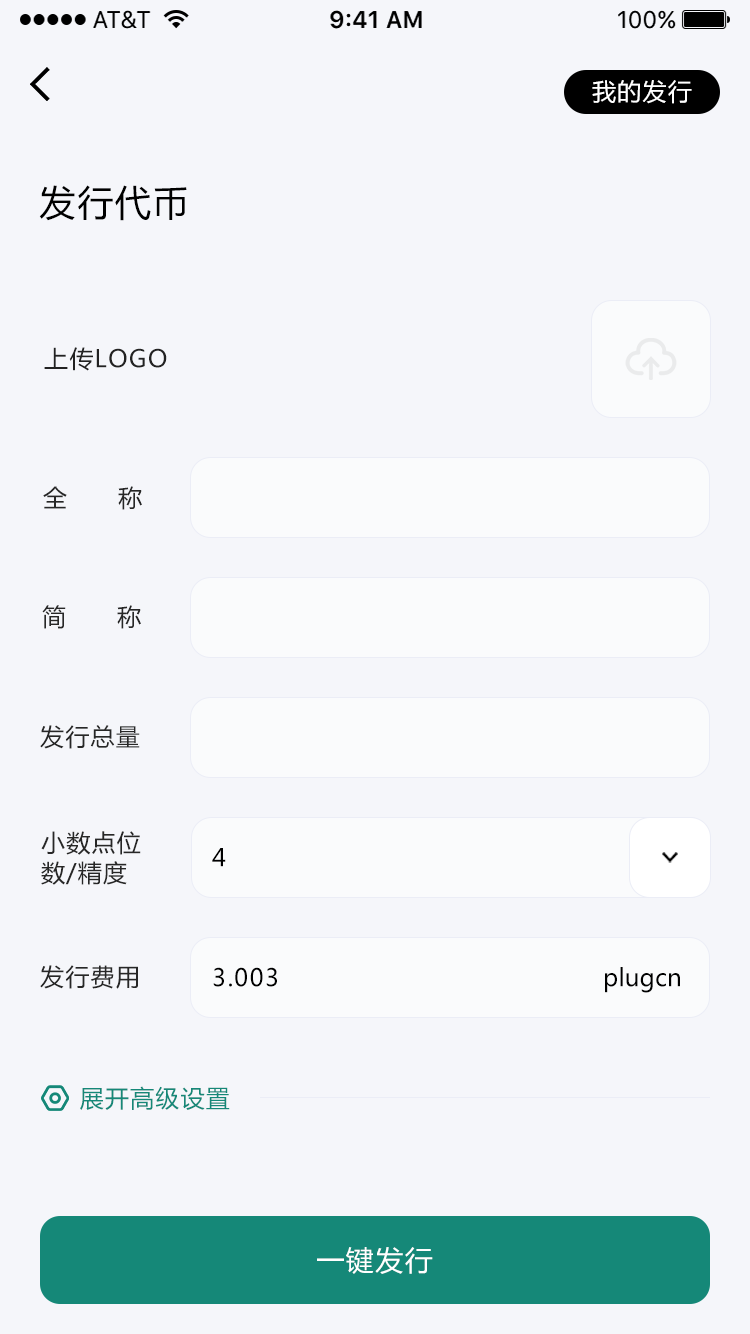
<style>
.page{position:relative;width:750px;height:1334px;background:#f5f6fa}
.page>*{position:absolute;margin:0}
.t1{font:24px "MicrosoftYaHei";letter-spacing:0.05em;color:#ffffff}
.t2{font:36px "MicrosoftYaHei";letter-spacing:0.05em;color:#000000}
.t3{font:24px "MicrosoftYaHei";letter-spacing:0.05em;color:#222222}
.t4{font:24px "MicrosoftYaHei";letter-spacing:0.05em;color:#272727}
.t5{font:24px/30px "MicrosoftYaHei";letter-spacing:0.05em;color:#272727}
.t6{font:24px "MicrosoftYaHei";letter-spacing:0.05em;color:#000000}
.t7{font:24px "MicrosoftYaHei";color:#000000}
.t8{font:24px "MicrosoftYaHei";letter-spacing:0.05em;color:#158878}
.t9{font:28px "MicrosoftYaHei";letter-spacing:0.05em;color:#ffffff}
</style>
<div class="page">
<p class="t1" style="left:592px;top:80px;width:100px;height:24px">我的发行</p>
<p class="t2" style="left:39px;top:185px;width:148px;height:36px">发行代币</p>
<p class="t3" style="left:44px;top:347px;width:123px;height:24px">上传LOGO</p>
<p class="t4" style="left:43px;top:486px;width:99px;height:24px">全      称</p>
<p class="t4" style="left:42px;top:605px;width:99px;height:24px">简      称</p>
<p class="t4" style="left:40px;top:725px;width:100px;height:24px">发行总量</p>
<p class="t5" style="left:41px;top:831px;width:100px;height:54px">小数点位<br>数/精度</p>
<p class="t6" style="left:212px;top:848px;width:14px;height:19px">4</p>
<p class="t4" style="left:40px;top:965px;width:98px;height:24px">发行费用</p>
<p class="t6" style="left:213px;top:967px;width:64px;height:20px">3.003</p>
<p class="t7" style="left:605px;top:967px;width:75px;height:26px">plugcn</p>
<p class="t8" style="left:80px;top:1086px;width:150px;height:24px">展开高级设置</p>
<p class="t9" style="left:317px;top:1247px;width:116px;height:27px">一键发行</p>
</div>
